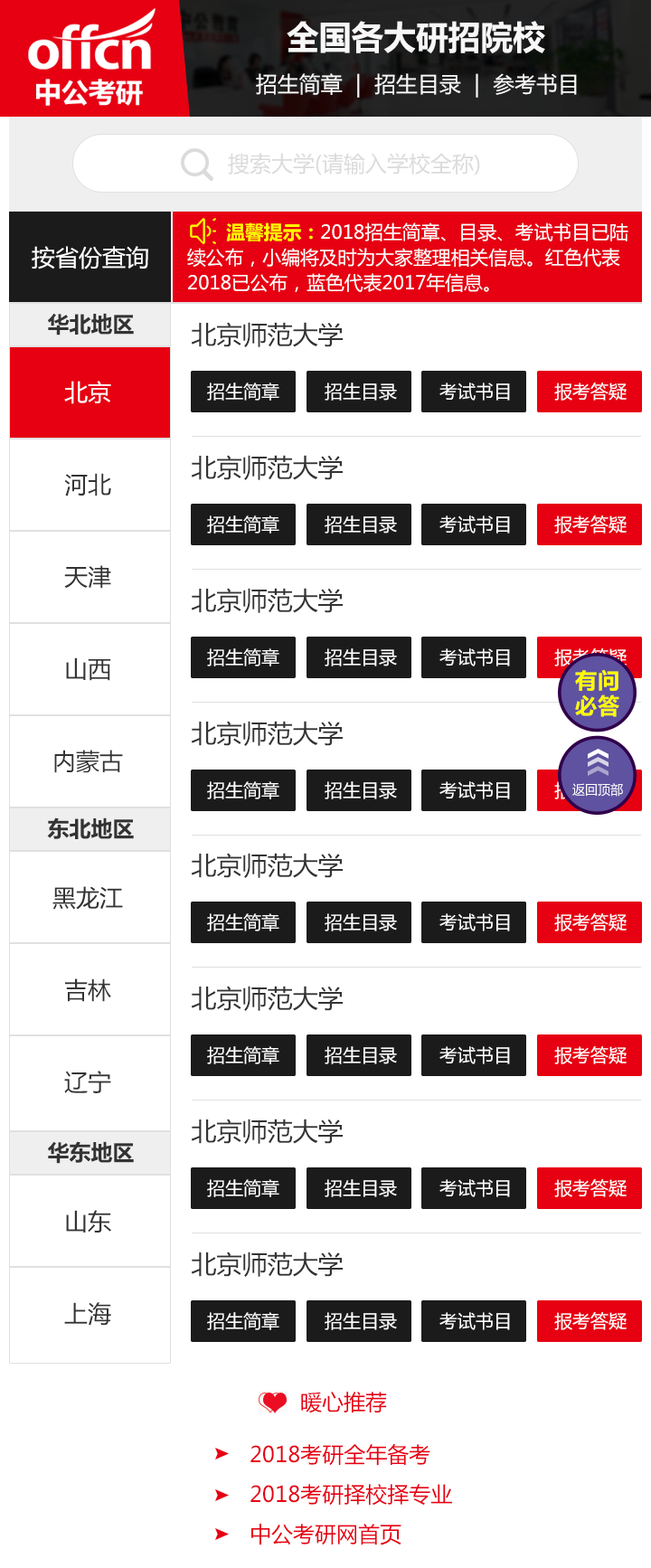
<style>
.page{position:relative;width:651px;height:1568px;background:#ffffff}
.page>*{position:absolute;margin:0}
.t1{font:33px "MicrosoftYaHei-Bold";color:#f7f7f7}
.t2{font:21.7px "MicrosoftYaHei";letter-spacing:0.01em;color:#f7f7f7}
.t3{font:21.7px "MicrosoftYaHei";color:#dbdbdb}
.t4{font:18.8px/25.3px "MicrosoftYaHei";color:#ffffff}
.t5{font:18.8px/25.3px "MicrosoftYaHei-Bold";color:#fffc00}
.t6{font:23.5px "MicrosoftYaHei";color:#ffffff}
.t7{font:21.7px "MicrosoftYaHei-Bold";color:#333333}
.t8{font:25.3px "MicrosoftYaHei";color:#333333}
.t9{font:23.5px/92.2px "MicrosoftYaHei";color:#333333}
.t10{font:23.5px/92.2px "MicrosoftYaHei";color:#ffffff}
.t11{font:18.1px "MicrosoftYaHei";color:#ffffff}
.t12{font:18.1px "MicrosoftYaHei"}
.t13{font:21.7px/25.3px "MicrosoftYaHei-Bold";letter-spacing:0.04em;color:#fffc00}
.t14{font:13px "MicrosoftYaHei";color:#ffffff}
.t15{font:21.7px "MicrosoftYaHei";color:#e60012}
.t16{font:21.7px/39.8px "MicrosoftYaHei";color:#e60012}
</style>
<div class="page">
<p class="t1" style="left:287px;top:21px;width:258px;height:32px">全国各大研招院校</p>
<p class="t2" style="left:256px;top:73px;width:321px;height:25px">招生简章  |  招生目录  |  参考书目</p>
<p class="t3" style="left:228px;top:153px;width:252px;height:22px">搜索大学(请输入学校全称)</p>
<p class="t4" style="left:187px;top:222px;width:441px;height:70px"><span class="t5">温馨提示：</span>2018招生简章、目录、考试书目已陆<br>续公布，小编将及时为大家整理相关信息。红色代表<br>2018已公布，蓝色代表2017年信息。</p>
<p class="t6" style="left:32px;top:246px;width:116px;height:23px">按省份查询</p>
<p class="t7" style="left:48px;top:313px;width:86px;height:22px">华北地区</p>
<p class="t8" style="left:191px;top:322px;width:152px;height:25px">北京师范大学</p>
<p class="t9" style="left:54px;top:381px;width:69px;height:392px;text-align:center"><span class="t10">北京<br></span>河北<br>天津<br>山西<br>内蒙古</p>
<p class="t11" style="left:207px;top:383px;width:72px;height:18px">招生简章</p>
<p class="t11" style="left:325px;top:383px;width:72px;height:18px">招生目录</p>
<p class="t11" style="left:439px;top:383px;width:71px;height:18px">考试书目</p>
<p class="t11" style="left:554px;top:383px;width:73px;height:18px">报考答疑</p>
<p class="t8" style="left:191px;top:455px;width:152px;height:25px">北京师范大学</p>
<p class="t11" style="left:207px;top:515px;width:72px;height:19px">招生简章</p>
<p class="t11" style="left:325px;top:515px;width:72px;height:19px">招生目录</p>
<p class="t11" style="left:439px;top:515px;width:71px;height:19px">考试书目</p>
<p class="t11" style="left:554px;top:515px;width:73px;height:19px">报考答疑</p>
<p class="t8" style="left:191px;top:588px;width:152px;height:25px">北京师范大学</p>
<p class="t11" style="left:207px;top:648px;width:72px;height:18px">招生简章</p>
<p class="t11" style="left:325px;top:648px;width:72px;height:18px">招生目录</p>
<p class="t11" style="left:439px;top:648px;width:71px;height:18px">考试书目</p>
<p class="t12" style="left:554px;top:648px;width:73px;height:18px">报考答疑</p>
<p class="t13" style="left:575px;top:669px;width:44px;height:48px">有问<br>必答</p>
<p class="t8" style="left:191px;top:721px;width:152px;height:25px">北京师范大学</p>
<p class="t11" style="left:207px;top:781px;width:72px;height:18px">招生简章</p>
<p class="t11" style="left:325px;top:781px;width:72px;height:18px">招生目录</p>
<p class="t11" style="left:439px;top:781px;width:71px;height:18px">考试书目</p>
<p class="t14" style="left:572px;top:783px;width:51px;height:14px">返回顶部</p>
<p class="t7" style="left:47px;top:817px;width:87px;height:22px">东北地区</p>
<p class="t8" style="left:191px;top:853px;width:152px;height:25px">北京师范大学</p>
<p class="t9" style="left:52px;top:886px;width:71px;height:207px;text-align:center">黑龙江<br>吉林<br>辽宁</p>
<p class="t11" style="left:207px;top:913px;width:72px;height:18px">招生简章</p>
<p class="t11" style="left:325px;top:913px;width:72px;height:18px">招生目录</p>
<p class="t11" style="left:439px;top:913px;width:71px;height:18px">考试书目</p>
<p class="t11" style="left:554px;top:913px;width:73px;height:18px">报考答疑</p>
<p class="t8" style="left:191px;top:986px;width:152px;height:25px">北京师范大学</p>
<p class="t11" style="left:207px;top:1046px;width:72px;height:18px">招生简章</p>
<p class="t11" style="left:325px;top:1046px;width:72px;height:18px">招生目录</p>
<p class="t11" style="left:439px;top:1046px;width:71px;height:18px">考试书目</p>
<p class="t11" style="left:554px;top:1046px;width:73px;height:18px">报考答疑</p>
<p class="t8" style="left:191px;top:1119px;width:152px;height:25px">北京师范大学</p>
<p class="t7" style="left:48px;top:1141px;width:86px;height:23px">华东地区</p>
<p class="t11" style="left:207px;top:1179px;width:72px;height:18px">招生简章</p>
<p class="t11" style="left:325px;top:1179px;width:72px;height:18px">招生目录</p>
<p class="t11" style="left:439px;top:1179px;width:71px;height:18px">考试书目</p>
<p class="t11" style="left:554px;top:1179px;width:73px;height:18px">报考答疑</p>
<p class="t9" style="left:64px;top:1210px;width:47px;height:116px;text-align:center">山东<br>上海</p>
<p class="t8" style="left:191px;top:1252px;width:152px;height:25px">北京师范大学</p>
<p class="t11" style="left:207px;top:1312px;width:72px;height:18px">招生简章</p>
<p class="t11" style="left:325px;top:1312px;width:72px;height:18px">招生目录</p>
<p class="t11" style="left:439px;top:1312px;width:71px;height:18px">考试书目</p>
<p class="t11" style="left:554px;top:1312px;width:73px;height:18px">报考答疑</p>
<p class="t15" style="left:301px;top:1392px;width:86px;height:21px">暖心推荐</p>
<p class="t16" style="left:250px;top:1443px;width:202px;height:102px">2018考研全年备考<br>2018考研择校择专业<br>中公考研网首页</p>
</div>
